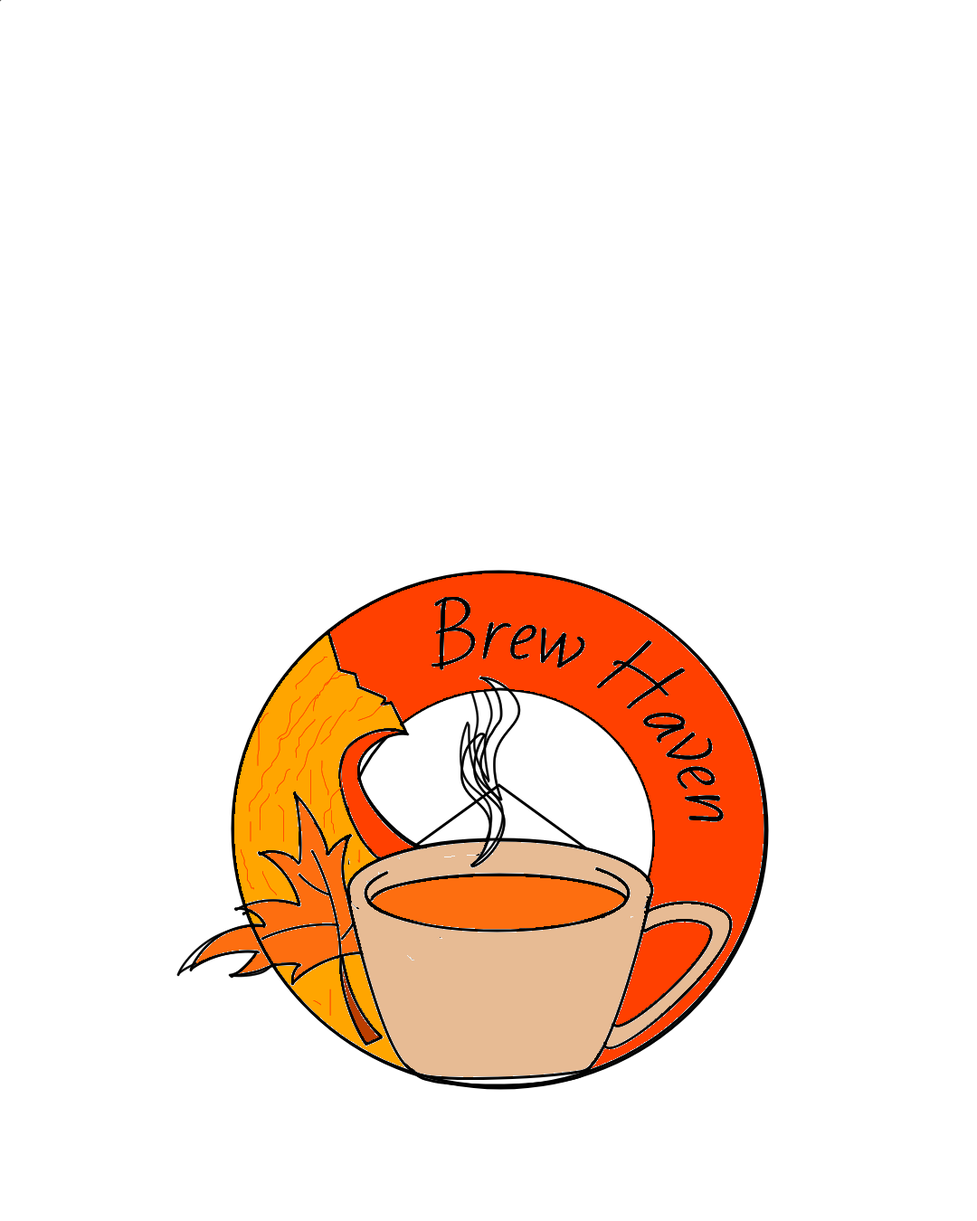
<style>
.page{position:relative;width:977px;height:1221px;background:#ffffff}
.page>*{position:absolute;margin:0}
.t1{font:67.8px "BadScript-Regular";color:#000000}
</style>
<div class="page">
<p class="t1" style="left:430px;top:596px;width:294px;height:226px;rotate:33deg">Brew Haven</p>
</div>
